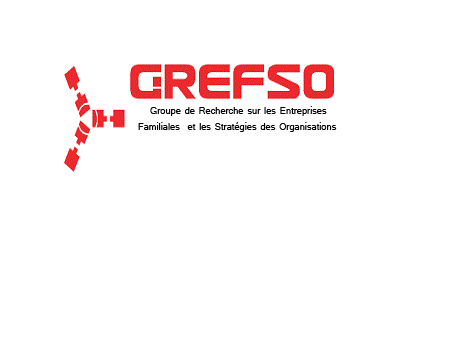
<style>
.page{position:relative;width:454px;height:340px;background:#ffffff}
.page>*{position:absolute;margin:0}
.t1{font:10px "Shruti";color:#000000}
</style>
<div class="page">
<p class="t1" style="left:150px;top:106px;width:177px;height:10px">Groupe de Recherche sur les Entreprises</p>
<p class="t1" style="left:138px;top:122px;width:199px;height:10px">Familiales  et les Stratégies des Organisations</p>
</div>
